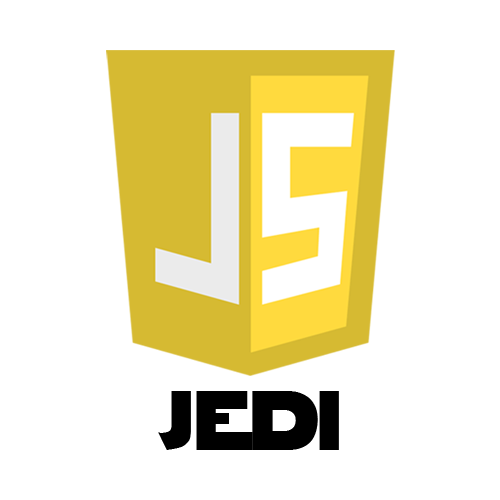
<style>
.page{position:relative;width:500px;height:500px;background:#ffffff}
.page>*{position:absolute;margin:0}
.t1{font:83.7px "StarJediSpecialEdition";color:#000000}
</style>
<div class="page">
<p class="t1" style="left:158px;top:391px;width:181px;height:59px">Jedi</p>
</div>
